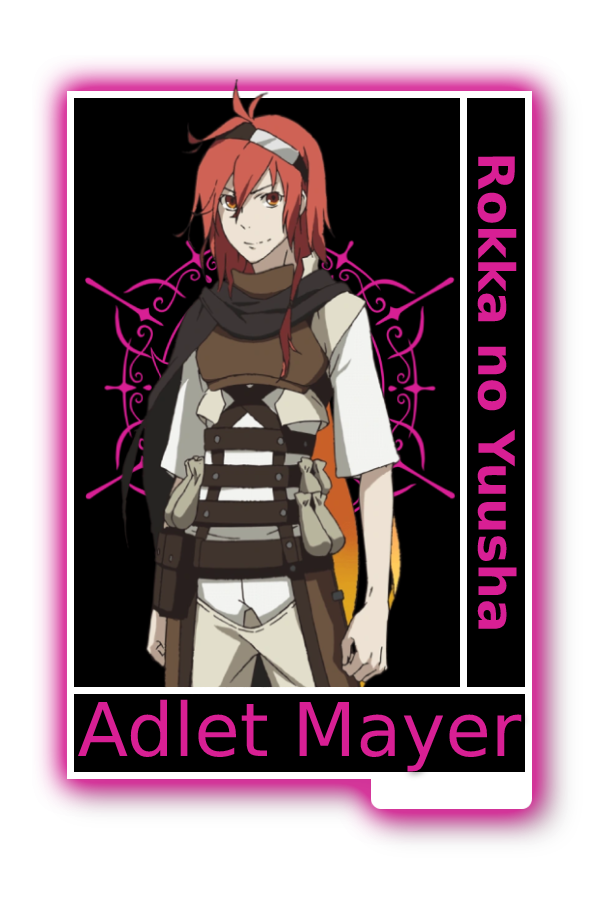
<style>
.page{position:relative;width:600px;height:900px;background:#000000}
.page>*{position:absolute;margin:0}
.t1{font:50px "MADETOMMY-Bold";color:#d81f94}
.t2{font:74px "CoolveticaRg-Regular";color:#d81f94}
</style>
<div class="page">
<p class="t1" style="left:477px;top:156px;width:40px;height:473px;rotate:90deg">Rokka no Yuusha</p>
<p class="t2" style="left:78px;top:699px;width:444px;height:73px">Adlet Mayer</p>
</div>
